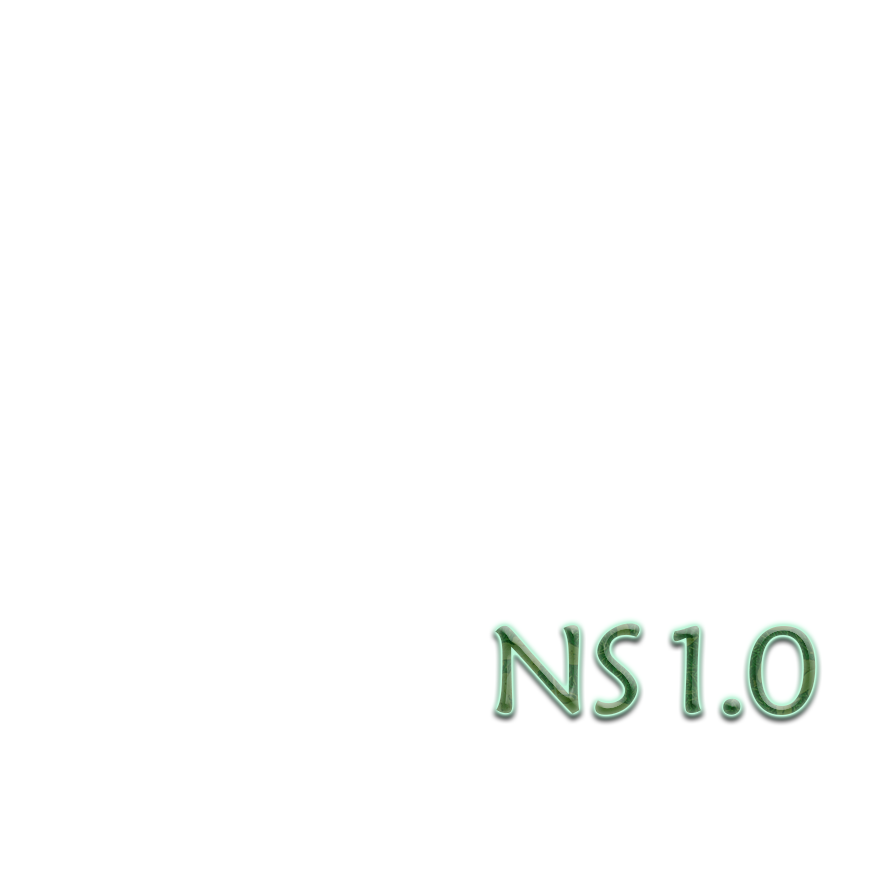
<style>
.page{position:relative;width:872px;height:872px;background:#ffffff}
.page>*{position:absolute;margin:0}
.t1{font:124.7px "STXinwei";letter-spacing:-0.03em}
</style>
<div class="page">
<p class="t1" style="left:495px;top:623px;width:321px;height:92px">NS 1.0</p>
</div>
